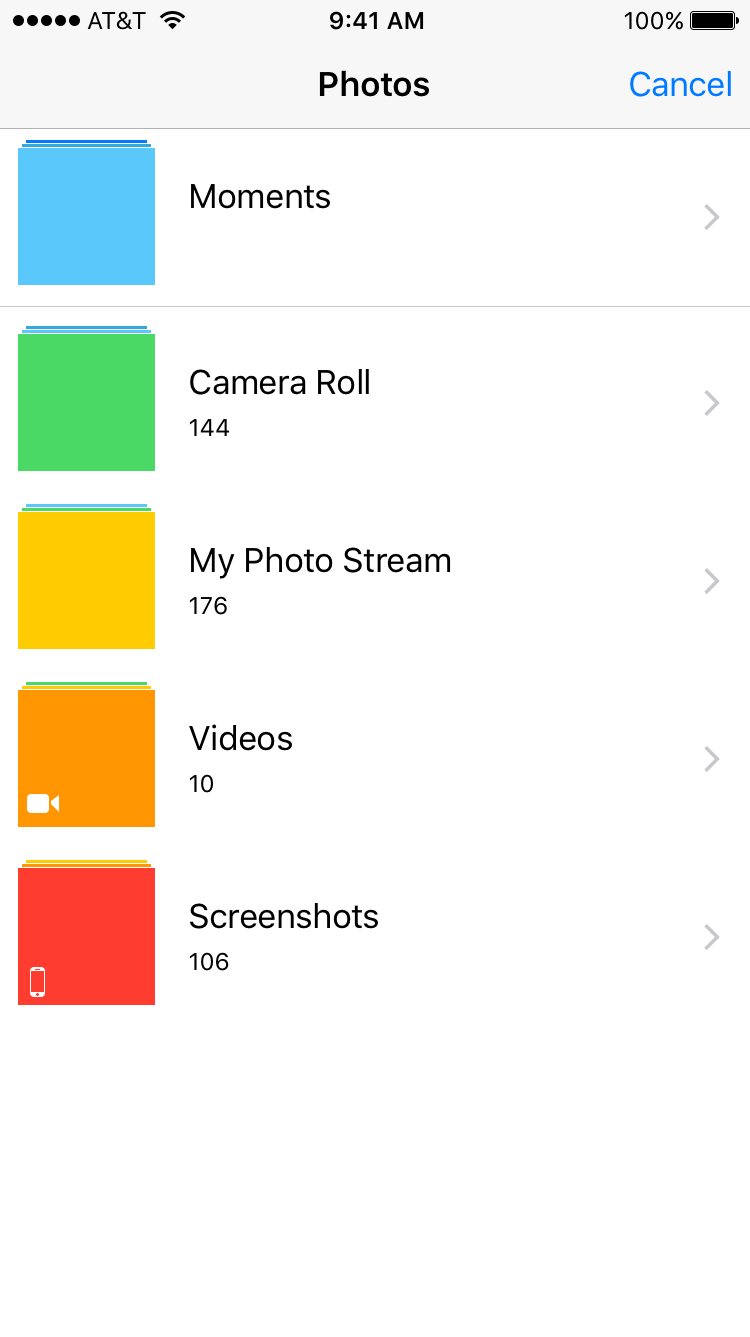
<style>
.page{position:relative;width:750px;height:1337px;background:#ffffff}
.page>*{position:absolute;margin:0}
.t1{font:34px "SFUIText-Semibold";letter-spacing:-0.025em;color:#000000}
.t2{font:34px "SFUIText-Regular";letter-spacing:-0.03em;color:#157efb}
.t3{font:34px "SFUIText-Regular";letter-spacing:-0.025em;color:#000000}
.t4{font:24px "SFUIText-Regular";color:#000000}
</style>
<div class="page">
<p class="t1" style="left:319px;top:70px;width:110px;height:27px">Photos</p>
<p class="t2" style="left:630px;top:71px;width:101px;height:26px">Cancel</p>
<p class="t3" style="left:191px;top:184px;width:139px;height:25px">Moments</p>
<p class="t3" style="left:190px;top:369px;width:179px;height:26px">Camera Roll</p>
<p class="t4" style="left:189px;top:419px;width:41px;height:17px">144</p>
<p class="t3" style="left:191px;top:547px;width:260px;height:32px">My Photo Stream</p>
<p class="t4" style="left:189px;top:596px;width:38px;height:19px">176</p>
<p class="t3" style="left:189px;top:724px;width:103px;height:27px">Videos</p>
<p class="t4" style="left:189px;top:774px;width:24px;height:19px">10</p>
<p class="t3" style="left:190px;top:903px;width:188px;height:26px">Screenshots</p>
<p class="t4" style="left:189px;top:952px;width:40px;height:19px">106</p>
</div>
